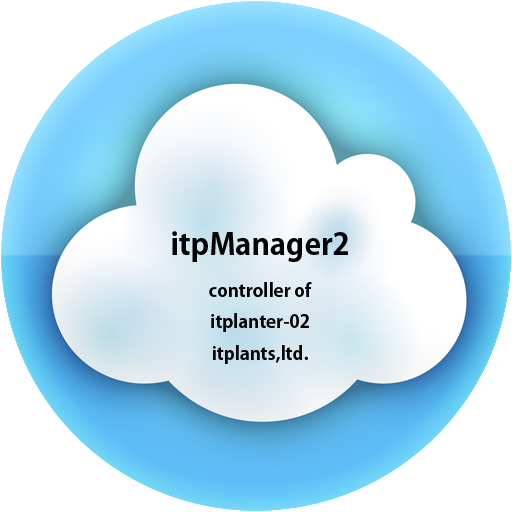
<style>
.page{position:relative;width:512px;height:512px;background:#ffffff}
.page>*{position:absolute;margin:0}
.t1{font:18px "KozGoPro-Bold";color:#040404}
.t2{font:30px "KozGoPro-Bold";color:#040404}
</style>
<div class="page">
<p class="t1" style="left:172px;top:231px;width:176px;height:133px;text-align:center"><span class="t2">itpManager2<br></span>controller of itplanter-02<br>itplants,ltd.</p>
</div>
